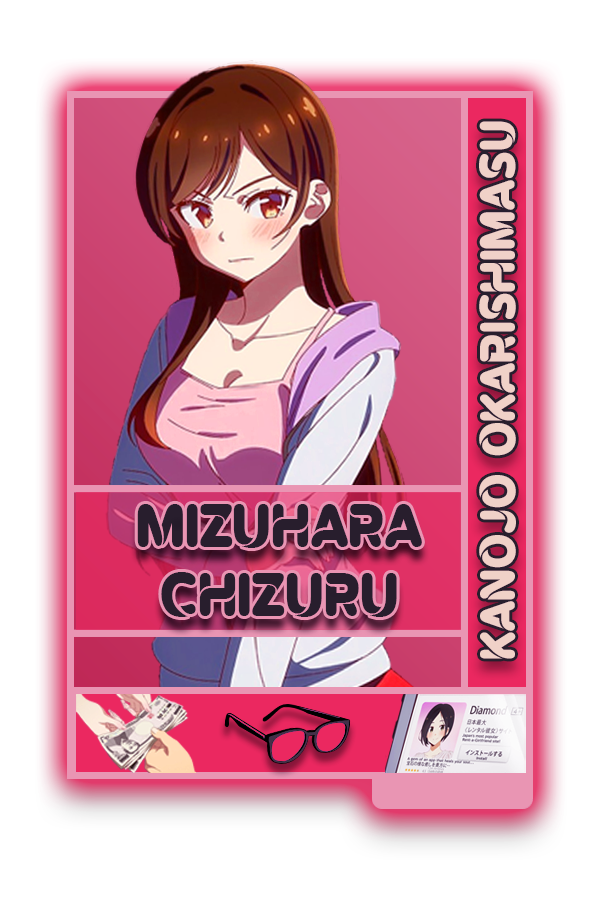
<style>
.page{position:relative;width:600px;height:900px;background:#ffffff}
.page>*{position:absolute;margin:0}
.t1{font:50px "OMEGLE-Regular";color:#edcfc5}
.t2{font:62.5px "OMEGLE-Regular";color:#252525}
</style>
<div class="page">
<p class="t1" style="left:479px;top:121px;width:37px;height:538px;rotate:-90deg">KANOJO OKARISHIMASU</p>
<p class="t2" style="left:137px;top:504px;width:285px;height:44px">MIZUHARA</p>
<p class="t2" style="left:161px;top:572px;width:236px;height:45px">CHIZURU</p>
</div>
